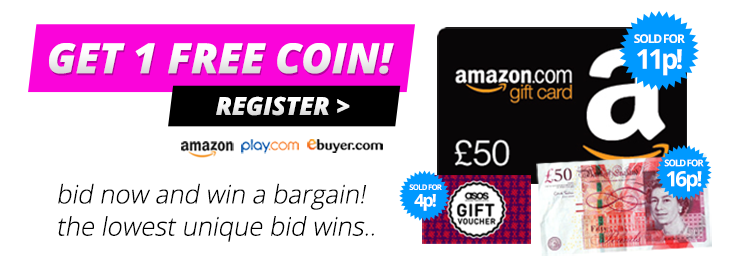
<style>
.page{position:relative;width:744px;height:280px;background:#ffffff}
.page>*{position:absolute;margin:0}
.t1{font:12.1px/24.2px "OpenSans-Bold";letter-spacing:-0.1em;color:#ffffff}
.t2{font:27.2px/25.7px "OpenSans-Bold";letter-spacing:-0.1em;color:#ffffff}
.t3{font:71px "OpenSans-ExtraboldItalic";color:#ffffff}
.t4{font:42.6px "OpenSans-ExtraboldItalic";color:#ffffff}
.t5{font:9.4px/18.7px "OpenSans-Bold";letter-spacing:-0.1em;color:#ffffff}
.t6{font:21.1px/19.9px "OpenSans-Bold";letter-spacing:-0.1em;color:#ffffff}
.t7{font:25.7px/32.1px "OpenSans-Light";color:#000000;font-style:italic}
.t8{font:7.7px/15.5px "OpenSans-Bold";letter-spacing:-0.1em;color:#ffffff}
.t9{font:17.4px/16.5px "OpenSans-Bold";letter-spacing:-0.1em;color:#ffffff}
</style>
<div class="page">
<p class="t1" style="left:634px;top:34px;width:51px;height:42px;text-align:center">SOLD FOR<br><span class="t2">11p!</span></p>
<p class="t3" style="left:49px;top:43px;width:345px;height:31px">GET 1 FREE COIN!</p>
<p class="t4" style="left:216px;top:96px;width:134px;height:20px">REGISTER &gt;</p>
<p class="t5" style="left:664px;top:159px;width:40px;height:33px;text-align:center">SOLD FOR<br><span class="t6">16p!</span></p>
<p class="t7" style="left:58px;top:183px;width:316px;height:59px">bid now and win a bargain!<br>the lowest unique bid wins..</p>
<p class="t8" style="left:409px;top:184px;width:33px;height:27px;text-align:center">SOLD FOR<br><span class="t9">4p!</span></p>
</div>
